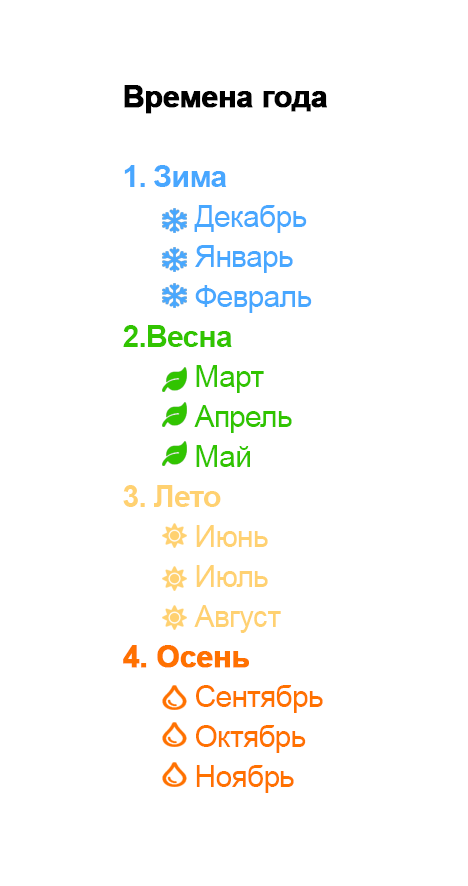
<style>
.page{position:relative;width:468px;height:886px;background:#ffffff}
.page>*{position:absolute;margin:0}
.t1{font:30px/40px "ArialMT";letter-spacing:-0.025em;color:#ff7100}
.t2{font:30px/40px "Arial-BoldMT";letter-spacing:-0.025em;color:#000000;font-weight:bold}
.t3{font:30px/40px "Arial-BoldMT";letter-spacing:-0.025em;color:#48a7ff}
.t4{font:30px/40px "ArialMT";letter-spacing:-0.025em;color:#48a7ff}
.t5{font:30px/40px "Arial-BoldMT";letter-spacing:-0.025em;color:#31c400}
.t6{font:30px/40px "ArialMT";letter-spacing:-0.025em;color:#31c400}
.t7{font:30px/40px "Arial-BoldMT";letter-spacing:-0.025em;color:#ffd171}
.t8{font:30px/40px "ArialMT";letter-spacing:-0.025em;color:#ffd171}
.t9{font:30px/40px "Arial-BoldMT";letter-spacing:-0.025em;color:#ff7100;font-weight:bold}
</style>
<div class="page">
<p class="t1" style="left:123px;top:85px;width:204px;height:708px"><span class="t2">Времена года<br><br></span><span class="t3">1. Зима<br></span><span class="t4">  Декабрь<br>  Январь<br>  Февраль<br></span><span class="t5">2.Весна<br></span><span class="t6">  Март<br>  Апрель<br>  Май<br></span><span class="t7">3. Лето<br></span><span class="t8">  Июнь<br>  Июль<br>  Август<br></span><span class="t9">4. Осень<br></span>  Сентябрь<br>  Октябрь<br>  Ноябрь</p>
</div>
